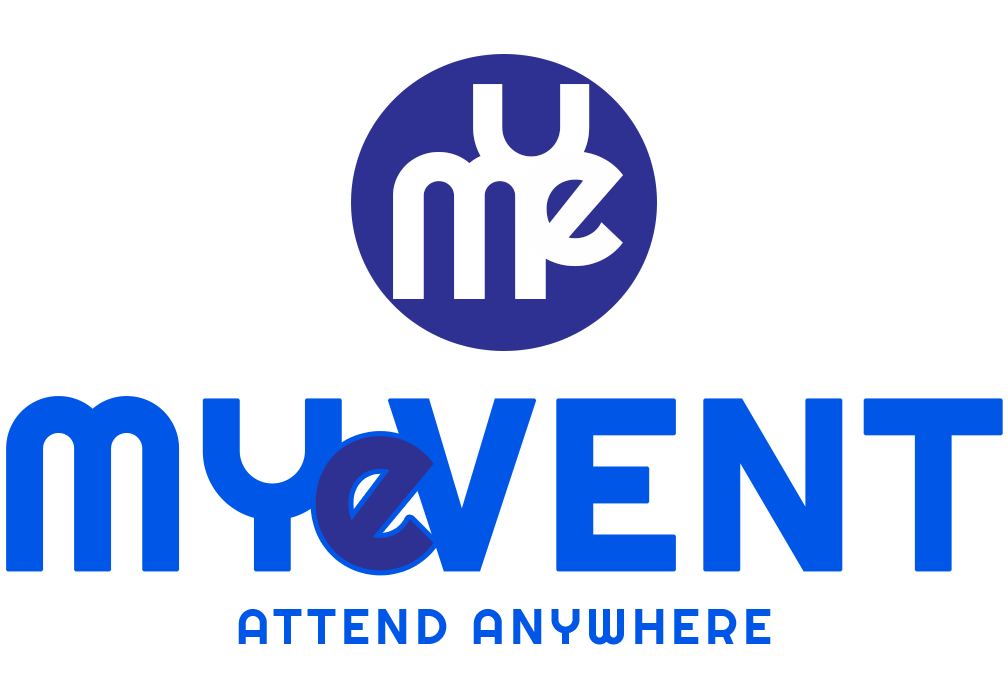
<style>
.page{position:relative;width:1008px;height:699px;background:#ffffff}
.page>*{position:absolute;margin:0}
.t1{font:206.9px "Righteous-Regular";letter-spacing:0.12em;color:#ffffff}
.t2{font:206.9px "Righteous-Regular";letter-spacing:0.12em;color:#ffffff;scale:1.05 1}
.t3{font:206.9px "Righteous-Regular";letter-spacing:0.12em;color:#fefeff;scale:1.05 1}
.t4{font:242.8px "Righteous-Regular";color:#0057e7;font-weight:bold}
.t5{font:242.8px "Righteous-Regular";letter-spacing:0.12em;color:#2e3192}
.t6{font:50px "Righteous-Regular";letter-spacing:0.1em;color:#0057e7}
</style>
<div class="page">
<p class="t1" style="left:473px;top:84px;width:117px;height:145px">Y</p>
<p class="t2" style="left:393px;top:152px;width:153px;height:147px">M</p>
<p class="t3" style="left:517px;top:151px;width:106px;height:116px">e</p>
<p class="t4" style="left:6px;top:396px;width:336px;height:176px">MY</p>
<p class="t4" style="left:387px;top:398px;width:616px;height:174px">VENT</p>
<p class="t5" style="left:315px;top:436px;width:119px;height:135px">e</p>
<p class="t6" style="left:238px;top:609px;width:533px;height:36px">ATTEND ANYWHERE</p>
</div>
